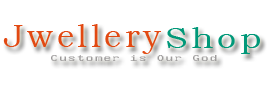
<style>
.page{position:relative;width:275px;height:94px;background:#ffffff}
.page>*{position:absolute;margin:0}
.t1{font:33.5px "BookmanOldStyle";letter-spacing:0.105em;color:#e24912}
.t2{font:29.1px "BookmanOldStyle";letter-spacing:0.105em;color:#009879;scale:1.18 1}
.t3{font:10px "WST_Czec";letter-spacing:0.105em;color:#9e9c9c}
</style>
<div class="page">
<p class="t1" style="left:3px;top:24px;width:158px;height:30px">Jwellery</p>
<p class="t2" style="left:167px;top:27px;width:93px;height:27px">Shop</p>
<p class="t3" style="left:51px;top:55px;width:166px;height:6px">Customer is Our God</p>
</div>
